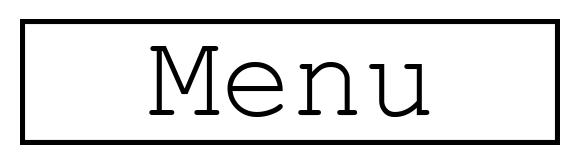
<style>
.page{position:relative;width:580px;height:163px;background:#ffffff}
.page>*{position:absolute;margin:0}
.t1{font:120px "CourierNewPSMT";color:#000000}
</style>
<div class="page">
<p class="t1" style="left:149px;top:46px;width:281px;height:71px">Menu</p>
</div>
